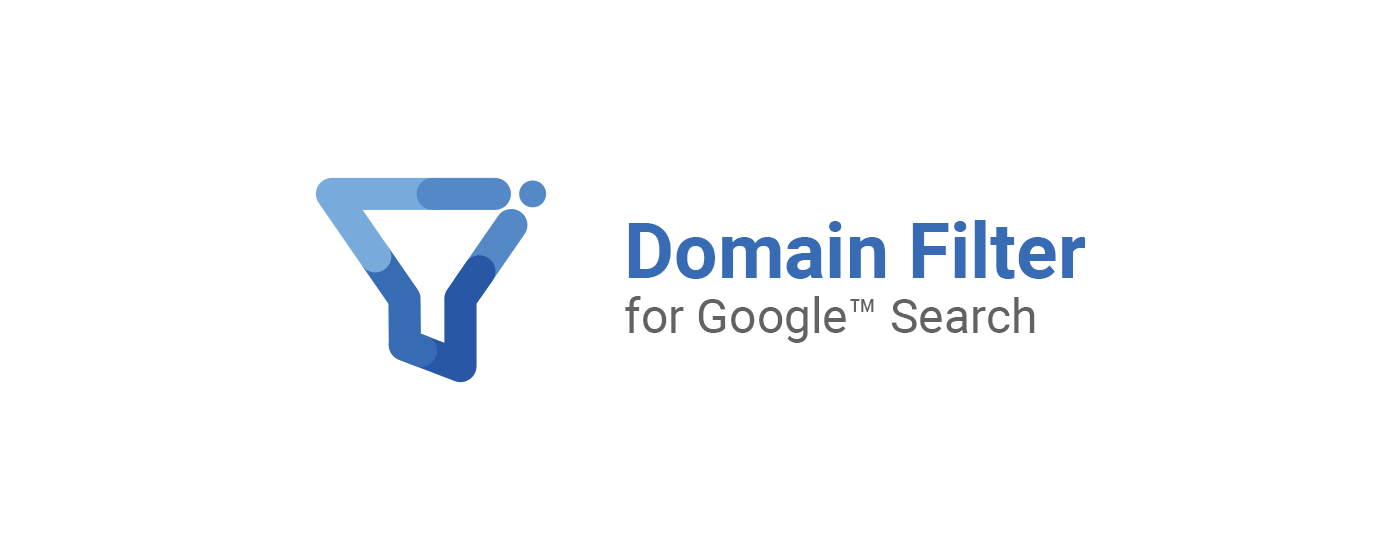
<style>
.page{position:relative;width:1400px;height:560px;background:#ffffff}
.page>*{position:absolute;margin:0}
.t1{font:48px/55px "Roboto-Regular";color:#626262}
.t2{font:76.8px/55px "Roboto-Bold";color:#376cb5}
</style>
<div class="page">
<p class="t1" style="left:625px;top:220px;width:461px;height:123px"><span class="t2">Domain Filter <br></span>for Google™ Search</p>
</div>
